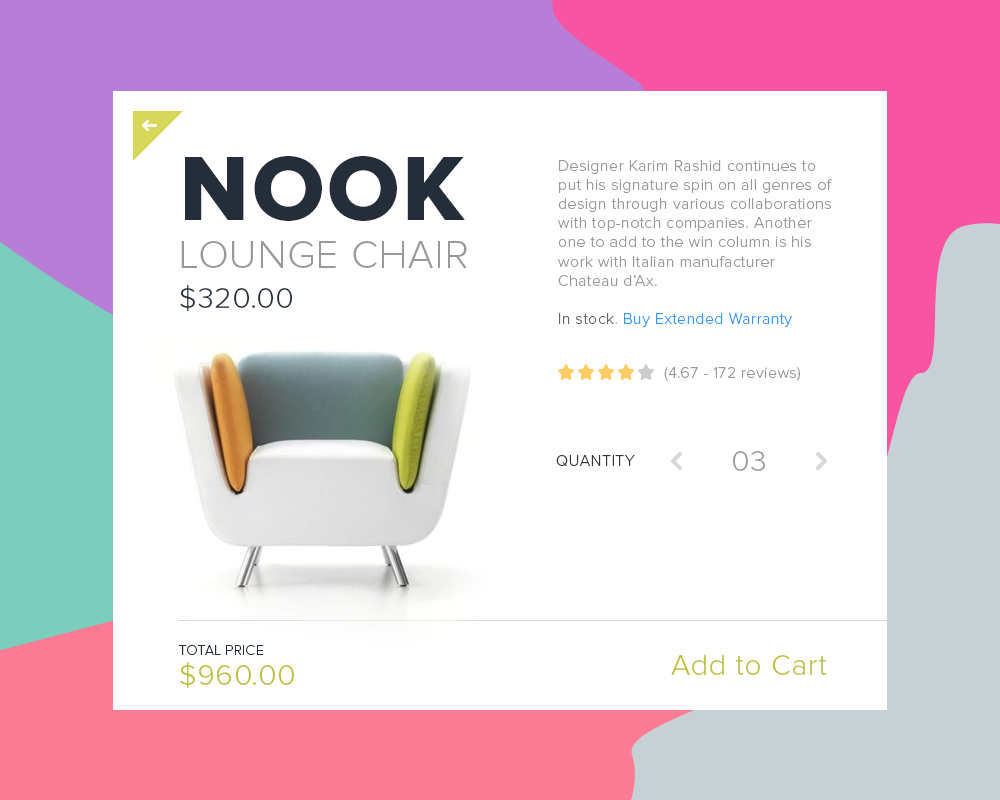
<style>
.page{position:relative;width:1000px;height:800px;background:#ffffff}
.page>*{position:absolute;margin:0}
.t1{font:40px "ProximaNova-Light";letter-spacing:0.025em;color:#999999;text-transform:uppercase}
.t2{font:94.9px "ProximaNova-Extrabld";letter-spacing:0.025em;color:#232e3a;text-transform:uppercase}
.t3{font:16px "ProximaNova-Light";letter-spacing:0.025em;color:#999999}
.t4{font:16px "ProximaNova-Light";letter-spacing:0.025em;color:#666666}
.t5{font:16px "ProximaNova-Light";letter-spacing:0.025em;color:#3399ff}
.t6{font:30px "ProximaNova-Light";letter-spacing:0.025em;color:#232e3a}
.t7{font:16px "ProximaNova-Light";letter-spacing:0.025em;color:#333333;text-transform:uppercase}
.t8{font:30px "ProximaNova-Light";letter-spacing:0.025em;color:#999999}
.t9{font:14px "ProximaNova-Light";letter-spacing:0.025em;color:#232e3a;text-transform:uppercase}
.t10{font:30px "ProximaNova-Light";letter-spacing:0.025em;color:#bcbd31}
</style>
<div class="page">
<p class="t1" style="left:181px;top:156px;width:286px;height:112px"><span class="t2">Nook<br></span>Lounge Chair</p>
<p class="t3" style="left:558px;top:160px;width:274px;height:167px">Designer Karim Rashid continues to put his signature spin on all genres of design through various collaborations with top-notch companies. Another one to add to the win column is his work with Italian manufacturer Chateau d’Ax. <br><br><span class="t4">In stock</span>. <span class="t5">Buy Extended Warranty</span></p>
<p class="t6" style="left:180px;top:285px;width:113px;height:26px">$320.00</p>
<p class="t3" style="left:664px;top:367px;width:136px;height:14px">(4.67 - 172 reviews)</p>
<p class="t7" style="left:556px;top:455px;width:79px;height:12px">quantity</p>
<p class="t8" style="left:732px;top:451px;width:33px;height:20px">03</p>
<p class="t9" style="left:179px;top:645px;width:85px;height:10px">Total price</p>
<p class="t10" style="left:671px;top:654px;width:156px;height:21px">Add to Cart</p>
<p class="t10" style="left:180px;top:662px;width:114px;height:26px">$960.00</p>
</div>
